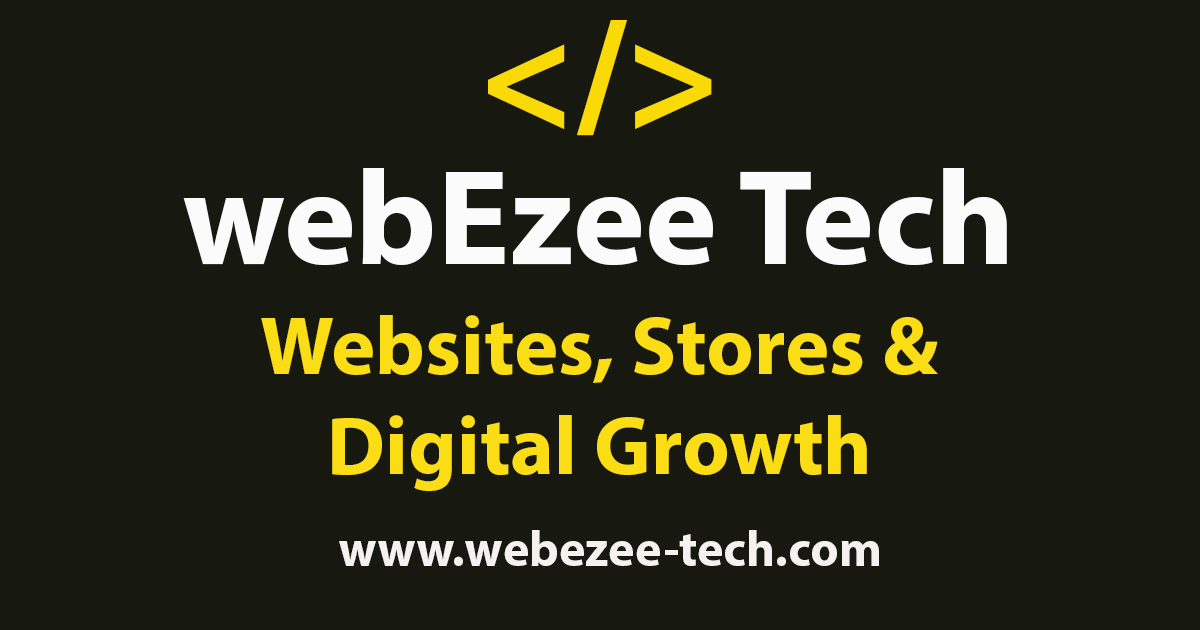
<style>
.page{position:relative;width:1200px;height:630px;background:#171810}
.page>*{position:absolute;margin:0}
.t1{font:158.7px "MyriadPro-Bold";color:#f9d906}
.t2{font:135.9px "MyriadPro-Bold";color:#fbfbfb}
.t3{font:83.3px "MyriadPro-Bold";color:#fbdd16}
.t4{font:50px "MyriadPro-Bold";color:#f6f1f1}
</style>
<div class="page">
<p class="t1" style="left:488px;top:20px;width:224px;height:116px">&lt;/&gt;</p>
<p class="t2" style="left:183px;top:168px;width:824px;height:98px">webEzee Tech</p>
<p class="t3" style="left:261px;top:315px;width:677px;height:176px;text-align:center">Websites, Stores &amp;<br>Digital Growth</p>
<p class="t4" style="left:339px;top:530px;width:540px;height:36px">www.webezee-tech.com</p>
</div>
